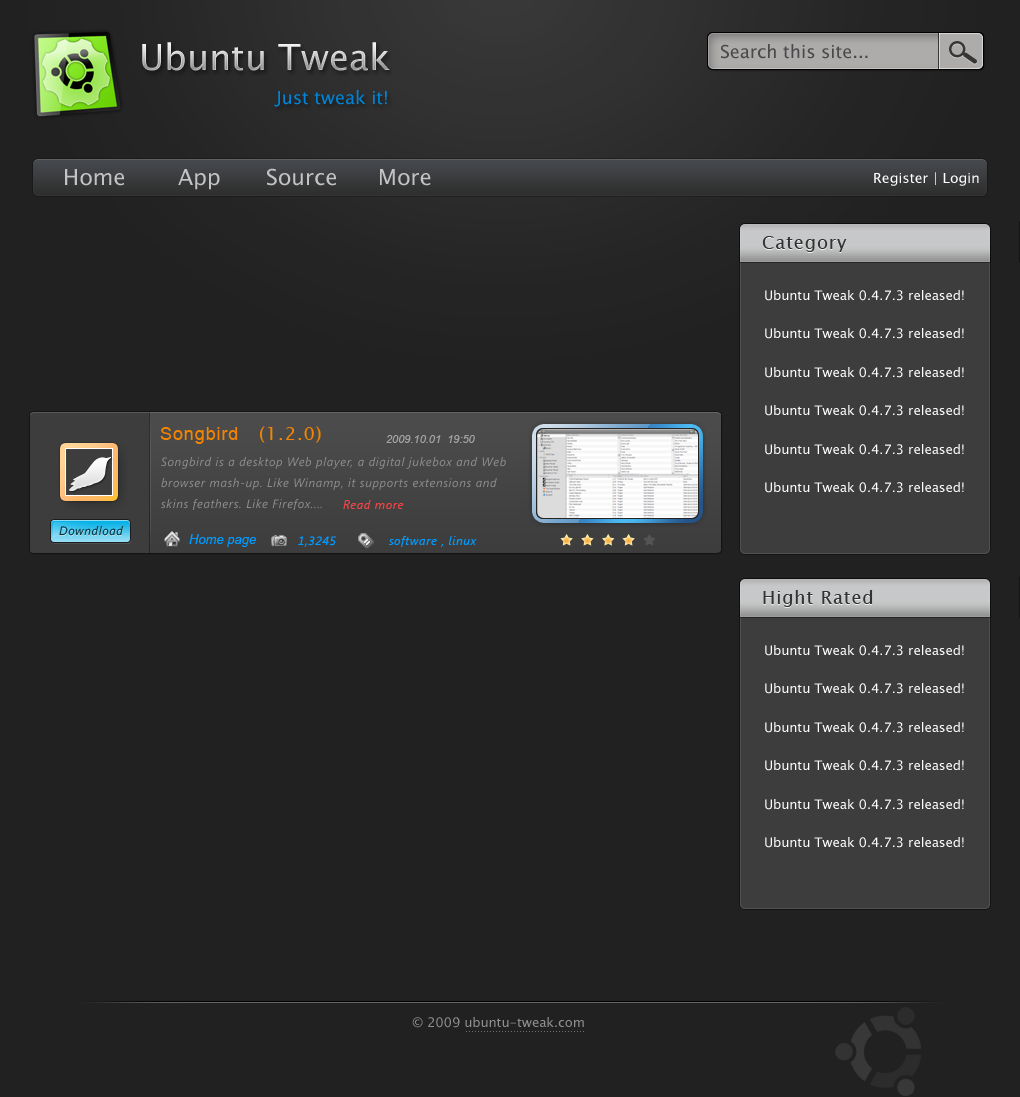
<style>
.page{position:relative;width:1020px;height:1097px;background:#212121}
.page>*{position:absolute;margin:0}
.t1{font:36px "LucidaSansUnicode"}
.t2{font:18px "LucidaSansUnicode";color:#494949}
.t3{font:18px "LucidaSansUnicode";color:#0084d7}
.t4{font:22px "LucidaSansUnicode";color:#c3c3c3}
.t5{font:14px "LucidaSansUnicode";color:#ffffff}
.t6{font:18px "LucidaSansUnicode";letter-spacing:0.05em;color:#333333}
.t7{font:18px "ArialMT";letter-spacing:0.05em;color:#f18403}
.t8{font:18px "LucidaSansUnicode";letter-spacing:0.05em;color:#f18403}
.t9{font:11px "Arial-ItalicMT";color:#a3a3a3}
.t10{font:12px "Segoe-Italic";letter-spacing:0.05em;color:#8f8d8d}
.t11{font:12px "SegoeUI-Italic";letter-spacing:0.05em;color:#ed4545}
.t12{font:12px "Segoe-Italic";letter-spacing:0.05em;color:#003647}
.t13{font:13px "Arial-ItalicMT";color:#009bff}
.t14{font:12px "Segoe-Italic";letter-spacing:0.05em;color:#009bff}
.t15{font:12px "SegoeUI-Italic";letter-spacing:0.05em;color:#009bff}
.t16{font:13px "LucidaSansUnicode";color:#908f8f}
</style>
<div class="page">
<p class="t1" style="left:142px;top:42px;width:248px;height:29px">Ubuntu Tweak</p>
<p class="t2" style="left:721px;top:44px;width:147px;height:15px">Search this site...</p>
<p class="t3" style="left:274px;top:90px;width:113px;height:17px">Just tweak it!</p>
<p class="t4" style="left:65px;top:169px;width:59px;height:17px">Home</p>
<p class="t4" style="left:178px;top:169px;width:42px;height:21px">App</p>
<p class="t4" style="left:267px;top:168px;width:69px;height:18px">Source</p>
<p class="t4" style="left:380px;top:169px;width:51px;height:17px">More</p>
<p class="t5" style="left:874px;top:172px;width:105px;height:14px">Register | Login</p>
<p class="t6" style="left:762px;top:236px;width:85px;height:16px">Category</p>
<p class="t7" style="left:160px;top:427px;width:78px;height:17px">Songbird</p>
<p class="t8" style="left:259px;top:426px;width:62px;height:17px">(1.2.0)</p>
<p class="t9" style="left:386px;top:435px;width:89px;height:8px">2009.10.01  19:50</p>
<p class="t10" style="left:161px;top:457px;width:345px;height:53px;text-align:justify">Songbird is a desktop Web player, a digital jukebox and Web <br>browser mash-up. Like Winamp, it supports extensions and <br>skins feathers. Like Firefox....</p>
<p class="t11" style="left:343px;top:500px;width:61px;height:9px">Read more</p>
<p class="t12" style="left:59px;top:525px;width:65px;height:11px">Downdload</p>
<p class="t13" style="left:189px;top:534px;width:67px;height:13px">Home page</p>
<p class="t14" style="left:298px;top:536px;width:38px;height:11px">1,3245</p>
<p class="t15" style="left:389px;top:536px;width:88px;height:11px">software , linux</p>
<p class="t6" style="left:763px;top:590px;width:110px;height:17px">Hight Rated</p>
<p class="t16" style="left:412px;top:1017px;width:172px;height:11px">© 2009 ubuntu-tweak.com</p>
</div>
